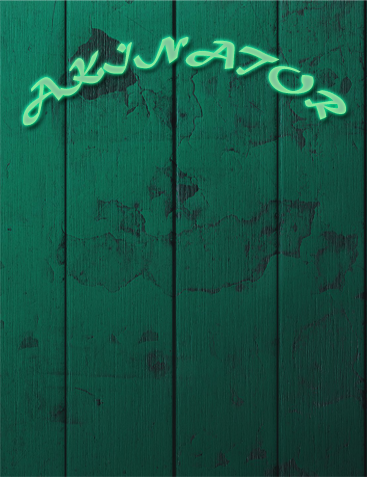
<style>
.page{position:relative;width:367px;height:477px}
.page>*{position:absolute;margin:0}
.t1{font:32px "MaturaMTScriptCapitals";color:#86da9d}
</style>
<div class="page">
<p class="t1" style="left:23px;top:36px;width:323px;height:90px">AKINATOR</p>
</div>
